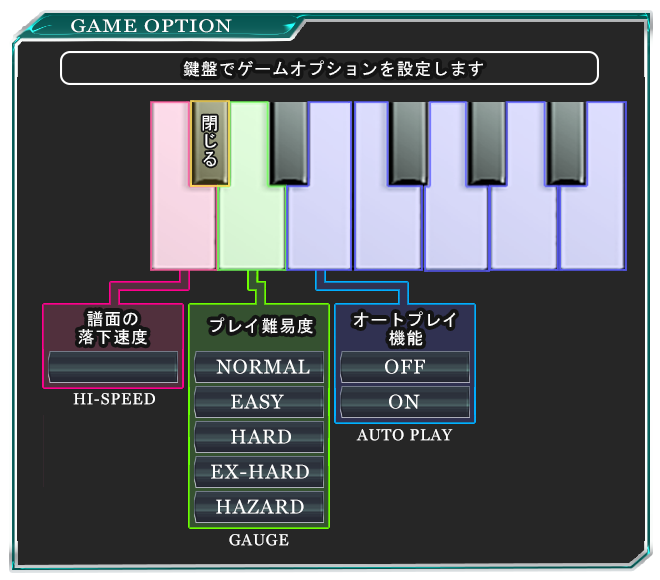
<style>
.page{position:relative;width:660px;height:580px;background:#262626}
.page>*{position:absolute;margin:0}
.t1{font:18.1px "Vani";letter-spacing:0.05em;color:#ffffff;scale:1.17 1}
.t2{font:18px "System";letter-spacing:0.05em;color:#ffffff}
.t3{font:18px/18px "System";letter-spacing:0.05em;color:#ffffff}
.t4{font:20px "Vani";letter-spacing:0.05em;color:#ffffff}
.t5{font:16px "Vani";letter-spacing:0.05em;color:#ffffff}
</style>
<div class="page">
<p class="t1" style="left:71px;top:19px;width:161px;height:14px">GAME OPTION</p>
<p class="t2" style="left:183px;top:60px;width:300px;height:17px">鍵盤でゲームオプションを設定します</p>
<p class="t3" style="left:202px;top:115px;width:15px;height:52px;text-align:center">閉<br>じ<br>る</p>
<p class="t3" style="left:78px;top:311px;width:69px;height:34px;text-align:center">譜面の<br>落下速度</p>
<p class="t2" style="left:210px;top:317px;width:103px;height:17px">プレイ難易度</p>
<p class="t3" style="left:354px;top:311px;width:102px;height:35px;text-align:center">オートプレイ<br>機能</p>
<p class="t4" style="left:216px;top:359px;width:94px;height:15px">NORMAL</p>
<p class="t4" style="left:385px;top:359px;width:40px;height:15px">OFF</p>
<p class="t5" style="left:73px;top:393px;width:82px;height:12px">HI-SPEED</p>
<p class="t4" style="left:231px;top:394px;width:53px;height:15px">EASY</p>
<p class="t4" style="left:389px;top:394px;width:31px;height:15px">ON</p>
<p class="t4" style="left:231px;top:429px;width:60px;height:15px">HARD</p>
<p class="t5" style="left:356px;top:429px;width:97px;height:12px">AUTO PLAY</p>
<p class="t4" style="left:211px;top:464px;width:98px;height:15px">EX-HARD</p>
<p class="t4" style="left:216px;top:499px;width:88px;height:15px">HAZARD</p>
<p class="t5" style="left:229px;top:534px;width:60px;height:12px">GAUGE</p>
</div>
